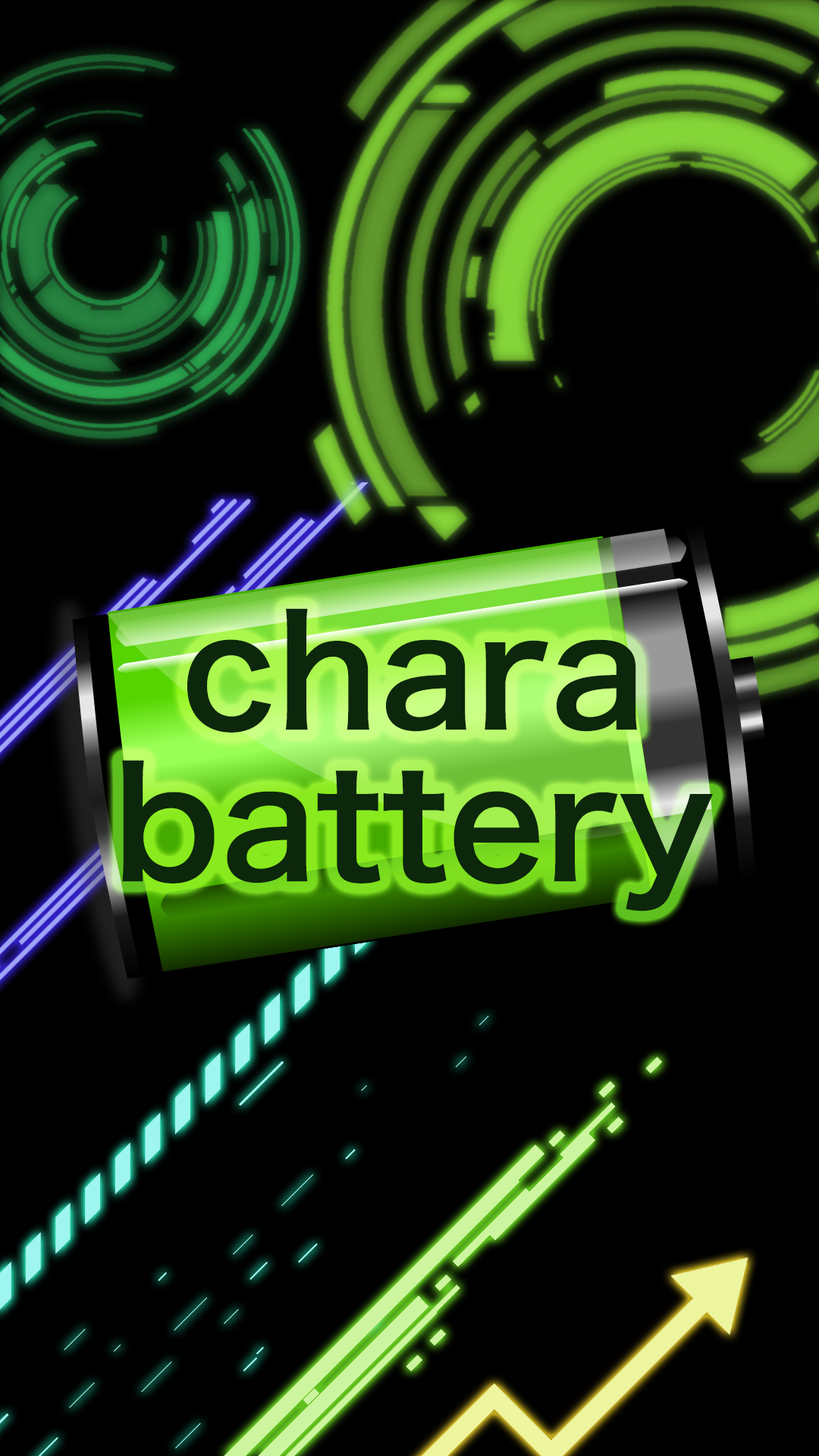
<style>
.page{position:relative;width:819px;height:1456px;background:#000000}
.page>*{position:absolute;margin:0}
.t1{font:151.7px/151.7px "HiraKakuPro-W6";color:#0c270b}
</style>
<div class="page">
<p class="t1" style="left:122px;top:608px;width:591px;height:304px;text-align:center">chara<br>battery</p>
</div>
